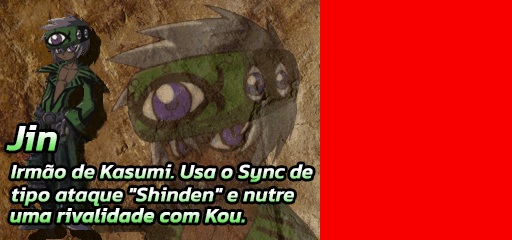
<style>
.page{position:relative;width:512px;height:240px;background:#f80000}
.page>*{position:absolute;margin:0}
.t1{font:36px "Kanit-MediumItalic";font-weight:bold}
.t2{font:20px "Kanit-MediumItalic";font-weight:bold}
</style>
<div class="page">
<p class="t1" style="left:6px;top:125px;width:51px;height:26px">Jin</p>
<p class="t2" style="left:11px;top:164px;width:302px;height:18px">Irmão de Kasumi. Usa o Sync de</p>
<p class="t2" style="left:12px;top:187px;width:282px;height:19px">tipo ataque "Shinden" e nutre</p>
<p class="t2" style="left:10px;top:208px;width:235px;height:15px">uma rivalidade com Kou.</p>
</div>
